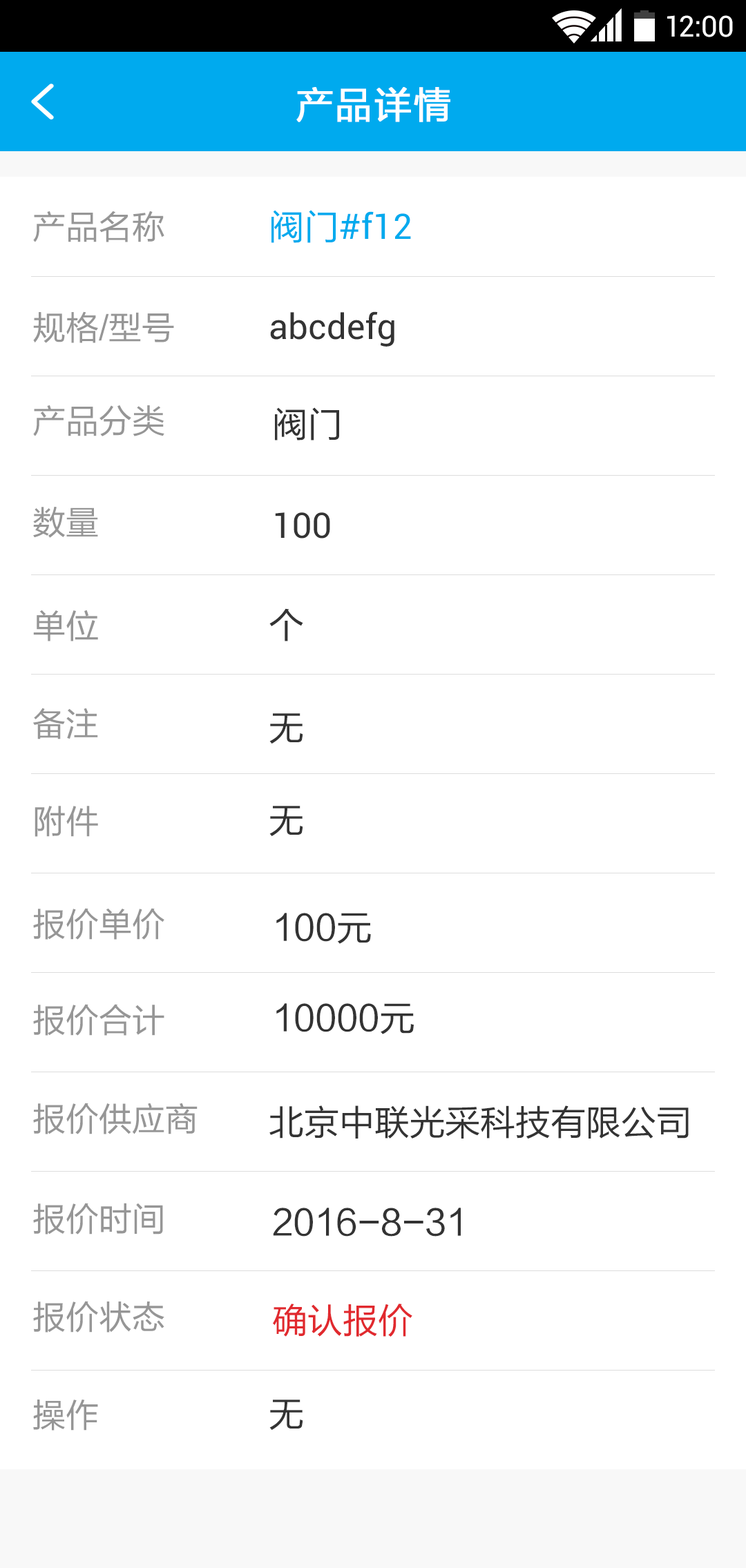
<style>
.page{position:relative;width:746px;height:1568px;background:#ffffff}
.page>*{position:absolute;margin:0}
.t1{font:29px "Roboto-Regular";color:#ffffff}
.t2{font:37.3px "FZLTHJW--GB1-0";letter-spacing:0.02em;color:#ffffff;font-weight:bold}
.t3{font:35.2px "Roboto-Regular";color:#00aaee}
.t4{font:35.2px "FZLTHJW--GB1-0";color:#00aaee}
.t5{font:33.1px "FZLTHJW--GB1-0";color:#969696}
.t6{font:35.2px "Roboto-Regular";color:#333333}
.t7{font:35.2px "FZLTHJW--GB1-0";color:#333333}
.t8{font:35.2px "FZLTHJW--GB1-0";color:#e1292e}
</style>
<div class="page">
<p class="t1" style="left:667px;top:15px;width:66px;height:22px">12:00</p>
<p class="t2" style="left:296px;top:87px;width:154px;height:35px">产品详情</p>
<p class="t3" style="left:271px;top:210px;width:140px;height:33px"><span class="t4">阀门</span>#f12</p>
<p class="t5" style="left:33px;top:211px;width:131px;height:31px">产品名称</p>
<p class="t5" style="left:33px;top:311px;width:141px;height:32px">规格/型号</p>
<p class="t6" style="left:270px;top:311px;width:124px;height:36px">abcdefg</p>
<p class="t5" style="left:33px;top:405px;width:131px;height:31px">产品分类</p>
<p class="t7" style="left:275px;top:407px;width:64px;height:34px">阀门</p>
<p class="t5" style="left:33px;top:507px;width:65px;height:31px">数量</p>
<p class="t6" style="left:275px;top:512px;width:55px;height:27px">100</p>
<p class="t5" style="left:33px;top:610px;width:65px;height:31px">单位</p>
<p class="t7" style="left:269px;top:608px;width:34px;height:33px">个</p>
<p class="t5" style="left:33px;top:708px;width:65px;height:31px">备注</p>
<p class="t7" style="left:269px;top:713px;width:34px;height:31px">无</p>
<p class="t5" style="left:35px;top:806px;width:63px;height:31px">附件</p>
<p class="t7" style="left:269px;top:806px;width:34px;height:30px">无</p>
<p class="t5" style="left:33px;top:908px;width:131px;height:32px">报价单价</p>
<p class="t7" style="left:276px;top:913px;width:95px;height:31px">100元</p>
<p class="t5" style="left:33px;top:1004px;width:131px;height:32px">报价合计</p>
<p class="t7" style="left:276px;top:1003px;width:138px;height:31px">10000元</p>
<p class="t5" style="left:33px;top:1103px;width:164px;height:31px">报价供应商</p>
<p class="t7" style="left:269px;top:1105px;width:419px;height:34px">北京中联光采科技有限公司</p>
<p class="t5" style="left:33px;top:1203px;width:130px;height:32px">报价时间</p>
<p class="t7" style="left:273px;top:1208px;width:188px;height:29px">2016-8-31</p>
<p class="t5" style="left:33px;top:1301px;width:131px;height:32px">报价状态</p>
<p class="t8" style="left:273px;top:1304px;width:139px;height:33px">确认报价</p>
<p class="t5" style="left:33px;top:1400px;width:65px;height:31px">操作</p>
<p class="t7" style="left:269px;top:1400px;width:34px;height:30px">无</p>
</div>
